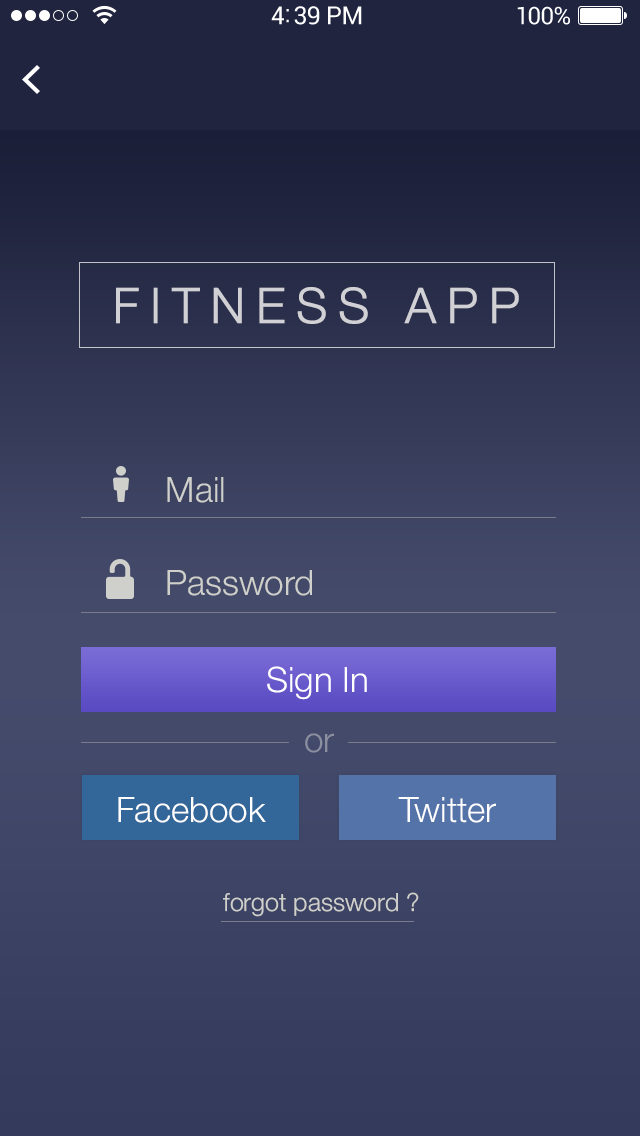
<style>
.page{position:relative;width:640px;height:1136px}
.page>*{position:absolute;margin:0}
.t1{font:49px "HelveticaNeue-Light";letter-spacing:0.2em;color:#d1d1d5;font-weight:bold}
.t2{font:35px "HelveticaNeue-Light";color:#cfd0cb}
.t3{font:35px "HelveticaNeue-Light";color:#ffffff}
.t4{font:35px "HelveticaNeue-Light";color:#8c8fa0}
.t5{font:25px "HelveticaNeue-Light";color:#cfd0cb}
</style>
<div class="page">
<p class="t1" style="left:116px;top:287px;width:403px;height:37px">FITNESS APP</p>
<p class="t2" style="left:167px;top:477px;width:57px;height:26px">Mail</p>
<p class="t2" style="left:167px;top:570px;width:145px;height:26px">Password</p>
<p class="t3" style="left:267px;top:666px;width:100px;height:34px">Sign In</p>
<p class="t4" style="left:305px;top:733px;width:29px;height:20px">or</p>
<p class="t3" style="left:118px;top:797px;width:148px;height:26px">Facebook</p>
<p class="t3" style="left:398px;top:797px;width:98px;height:26px">Twitter</p>
<p class="t5" style="left:223px;top:892px;width:196px;height:25px">forgot password ?</p>
</div>
